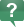
<style>
.page{position:relative;width:24px;height:27px;background:#449369}
.page>*{position:absolute;margin:0}
.t1{font:19.4px "Arial-BoldMT";letter-spacing:0.04em;color:#ffffff}
</style>
<div class="page">
<p class="t1" style="left:6px;top:3px;width:11px;height:14px">?</p>
</div>
